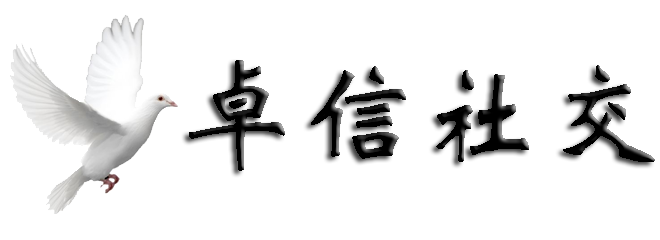
<style>
.page{position:relative;width:660px;height:240px;background:#ffffff}
.page>*{position:absolute;margin:0}
.t1{font:120px "STXinwei";color:#000000}
</style>
<div class="page">
<p class="t1" style="left:189px;top:60px;width:466px;height:111px">卓信社交</p>
</div>
